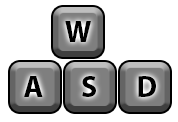
<style>
.page{position:relative;width:178px;height:122px;background:#ffffff}
.page>*{position:absolute;margin:0}
.t1{font:30px "MyriadPro-Bold";color:#000000}
</style>
<div class="page">
<p class="t1" style="left:65px;top:21px;width:26px;height:21px">W</p>
<p class="t1" style="left:24px;top:76px;width:19px;height:21px">A</p>
<p class="t1" style="left:82px;top:76px;width:14px;height:21px">S</p>
<p class="t1" style="left:138px;top:76px;width:18px;height:21px">D</p>
</div>
